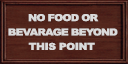
<style>
.page{position:relative;width:128px;height:64px}
.page>*{position:absolute;margin:0}
.t1{font:9.6px "Arial-Black";letter-spacing:-0.065em;color:#dadada;scale:1.12 1}
.t2{font:9.6px "Arial-Black";letter-spacing:-0.04em;color:#dadada;scale:1.12 1}
</style>
<div class="page">
<p class="t1" style="left:8px;top:14px;width:110px;height:36px">NO FOOD OR<br>BEVARAGE BEYOND <br>       <span class="t2">THIS POINT</span></p>
</div>
